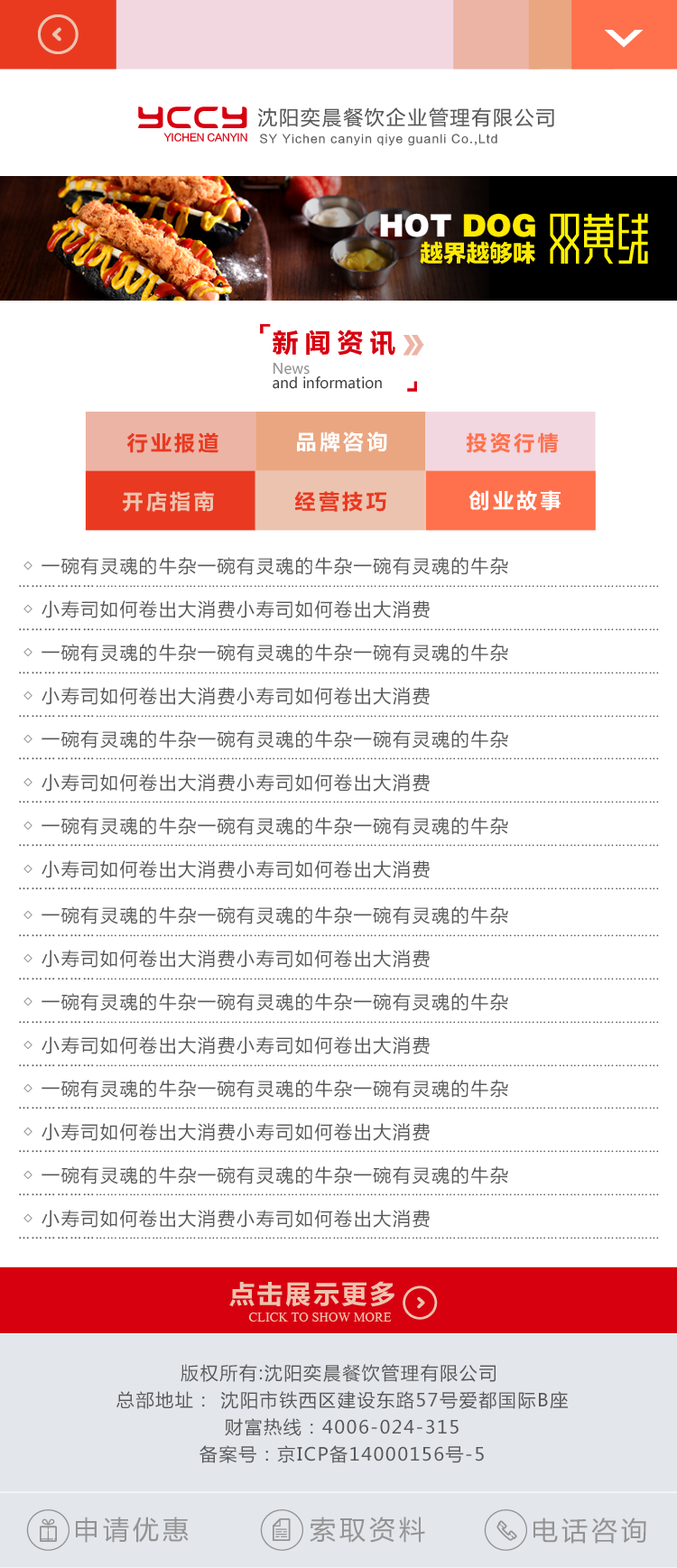
<style>
.page{position:relative;width:677px;height:1568px;background:#ffffff}
.page>*{position:absolute;margin:0}
.t1{font:41.5px "FYYZZT-";color:#d7000f}
.t2{font:20.4px "FZLTHK--GBK1-0";letter-spacing:0.05em;color:#595757}
.t3{font:9.8px "FZLTHJW--GB1-0";color:#d7000f}
.t4{font:11.2px "FZLTHK--GBK1-0";letter-spacing:0.1em;color:#595757}
.t5{font:31.1px "FZCCHJW--GB1-0";color:#ffffff;text-transform:uppercase}
.t6{font:31.1px "FZCCHJW--GB1-0";color:#ffea00;text-transform:uppercase}
.t7{font:23.6px "FZLTTHK--GBK1-0";color:#ffea00;text-transform:uppercase}
.t8{font:27.1px "FZLTCHK--GBK1-0";letter-spacing:0.2em;color:#d7000f}
.t9{font:14.5px/14.5px "MicrosoftYaHei";color:#383838}
.t10{font:14.5px/14.5px "MicrosoftYaHei";color:#919191}
.t11{font:21.7px "FZLTCHJW--GB1-0";letter-spacing:0.1em;color:#e93921}
.t12{font:21.7px "FZLTCHJW--GB1-0";letter-spacing:0.1em;color:#ffffff}
.t13{font:21.7px "FZLTCHJW--GB1-0";letter-spacing:0.1em;color:#ff714d}
.t14{font:21.7px "FZLTCHJW--GB1-0";letter-spacing:0.1em;color:#eec3af}
.t15{font:18.1px/43.3px "MicrosoftYaHei";letter-spacing:0.08em;color:#585858}
.t16{font:12.6px "MicrosoftYaHei";letter-spacing:0.08em;color:#585858}
.t17{font:14.4px "MicrosoftYaHei";letter-spacing:0.08em;color:#585858}
.t18{font:27.1px "FZLTCHJW--GB1-0";letter-spacing:0.04em;color:#ecc3af;text-transform:uppercase}
.t19{font:16.2px "Aparajita";color:#ecc3af;text-transform:uppercase}
.t20{font:18.1px/27.1px "MicrosoftYaHei";letter-spacing:0.08em;color:#585858}
.t21{font:27.1px "FZLTHK--GBK1-0";letter-spacing:0.1em;color:#939393}
</style>
<div class="page">
<p class="t1" style="left:138px;top:107px;width:109px;height:21px">yccy</p>
<p class="t2" style="left:257px;top:107px;width:297px;height:20px">沈阳奕晨餐饮企业管理有限公司</p>
<p class="t3" style="left:163px;top:133px;width:84px;height:9px">YICHEN CANYIN</p>
<p class="t4" style="left:260px;top:134px;width:237px;height:12px">SY Yichen canyin qiye guanli Co.,Ltd</p>
<p class="t5" style="left:380px;top:213px;width:155px;height:24px">hot <span class="t6">dog</span></p>
<p class="t7" style="left:420px;top:241px;width:115px;height:23px">越界越够味</p>
<p class="t8" style="left:273px;top:329px;width:122px;height:27px">新闻资讯</p>
<p class="t9" style="left:273px;top:362px;width:109px;height:27px"><span class="t10">News <br></span>and information</p>
<p class="t11" style="left:126px;top:432px;width:92px;height:21px">行业报道</p>
<p class="t12" style="left:297px;top:431px;width:90px;height:21px">品牌咨询</p>
<p class="t13" style="left:466px;top:432px;width:93px;height:21px">投资行情</p>
<p class="t14" style="left:123px;top:491px;width:91px;height:21px">开店指南</p>
<p class="t11" style="left:294px;top:491px;width:92px;height:21px">经营技巧</p>
<p class="t12" style="left:469px;top:490px;width:92px;height:21px">创业故事</p>
<p class="t15" style="left:23px;top:557px;width:485px;height:321px">◇ 一碗有灵魂的牛杂一碗有灵魂的牛杂一碗有灵魂的牛杂<br>◇ 小寿司如何卷出大消费小寿司如何卷出大消费<br>◇ 一碗有灵魂的牛杂一碗有灵魂的牛杂一碗有灵魂的牛杂<br>◇ 小寿司如何卷出大消费小寿司如何卷出大消费<br>◇ 一碗有灵魂的牛杂一碗有灵魂的牛杂一碗有灵魂的牛杂<br>◇ 小寿司如何卷出大消费小寿司如何卷出大消费<br>◇ 一碗有灵魂的牛杂一碗有灵魂的牛杂一碗有灵魂的牛杂<br>◇ 小寿司如何卷出大消费小寿司如何卷出大消费</p>
<p class="t16" style="left:19px;top:585px;width:640px;height:3px"><span class="t17">………………</span>……………………………………………………………………………………………………………………………………</p>
<p class="t16" style="left:19px;top:628px;width:640px;height:3px"><span class="t17">………………</span>……………………………………………………………………………………………………………………………………</p>
<p class="t16" style="left:19px;top:672px;width:640px;height:2px"><span class="t17">………………</span>……………………………………………………………………………………………………………………………………</p>
<p class="t16" style="left:19px;top:715px;width:640px;height:3px"><span class="t17">………………</span>……………………………………………………………………………………………………………………………………</p>
<p class="t16" style="left:19px;top:757px;width:640px;height:3px"><span class="t17">………………</span>……………………………………………………………………………………………………………………………………</p>
<p class="t16" style="left:19px;top:801px;width:640px;height:2px"><span class="t17">………………</span>……………………………………………………………………………………………………………………………………</p>
<p class="t16" style="left:19px;top:844px;width:640px;height:3px"><span class="t17">………………</span>……………………………………………………………………………………………………………………………………</p>
<p class="t16" style="left:19px;top:887px;width:640px;height:3px"><span class="t17">………………</span>……………………………………………………………………………………………………………………………………</p>
<p class="t15" style="left:23px;top:906px;width:485px;height:322px">◇ 一碗有灵魂的牛杂一碗有灵魂的牛杂一碗有灵魂的牛杂<br>◇ 小寿司如何卷出大消费小寿司如何卷出大消费<br>◇ 一碗有灵魂的牛杂一碗有灵魂的牛杂一碗有灵魂的牛杂<br>◇ 小寿司如何卷出大消费小寿司如何卷出大消费<br>◇ 一碗有灵魂的牛杂一碗有灵魂的牛杂一碗有灵魂的牛杂<br>◇ 小寿司如何卷出大消费小寿司如何卷出大消费<br>◇ 一碗有灵魂的牛杂一碗有灵魂的牛杂一碗有灵魂的牛杂<br>◇ 小寿司如何卷出大消费小寿司如何卷出大消费</p>
<p class="t16" style="left:19px;top:934px;width:640px;height:3px"><span class="t17">………………</span>……………………………………………………………………………………………………………………………………</p>
<p class="t16" style="left:19px;top:978px;width:640px;height:2px"><span class="t17">………………</span>……………………………………………………………………………………………………………………………………</p>
<p class="t16" style="left:19px;top:1021px;width:640px;height:3px"><span class="t17">………………</span>……………………………………………………………………………………………………………………………………</p>
<p class="t16" style="left:19px;top:1064px;width:640px;height:3px"><span class="t17">………………</span>……………………………………………………………………………………………………………………………………</p>
<p class="t16" style="left:19px;top:1107px;width:640px;height:2px"><span class="t17">………………</span>……………………………………………………………………………………………………………………………………</p>
<p class="t16" style="left:19px;top:1150px;width:640px;height:3px"><span class="t17">………………</span>……………………………………………………………………………………………………………………………………</p>
<p class="t16" style="left:19px;top:1193px;width:640px;height:3px"><span class="t17">………………</span>……………………………………………………………………………………………………………………………………</p>
<p class="t16" style="left:19px;top:1237px;width:640px;height:2px"><span class="t17">………………</span>……………………………………………………………………………………………………………………………………</p>
<p class="t18" style="left:229px;top:1281px;width:165px;height:26px">点击展示更多</p>
<p class="t19" style="left:248px;top:1313px;width:144px;height:9px">Click to show more</p>
<p class="t20" style="left:116px;top:1364px;width:452px;height:99px;text-align:center">版权所有:沈阳奕晨餐饮管理有限公司 <br>总部地址： 沈阳市铁西区建设东路57号爱都国际B座<br>财富热线：4006-024-315<br>备案号：京ICP备14000156号-5</p>
<p class="t21" style="left:76px;top:1517px;width:113px;height:26px">申请优惠</p>
<p class="t21" style="left:310px;top:1517px;width:115px;height:26px">索取资料</p>
<p class="t21" style="left:533px;top:1517px;width:113px;height:27px">电话咨询</p>
</div>
